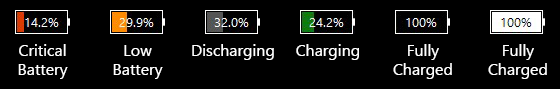
<style>
.page{position:relative;width:560px;height:89px;background:#000000}
.page>*{position:absolute;margin:0}
.t1{font:16px "SegoeUI";color:#ffffff}
</style>
<div class="page">
<p class="t1" style="left:18px;top:44px;width:50px;height:35px;text-align:center">Critical Battery</p>
<p class="t1" style="left:113px;top:45px;width:50px;height:34px;text-align:center">Low Battery</p>
<p class="t1" style="left:192px;top:44px;width:82px;height:16px">Discharging</p>
<p class="t1" style="left:296px;top:44px;width:63px;height:16px">Charging</p>
<p class="t1" style="left:393px;top:44px;width:59px;height:35px;text-align:center">Fully Charged</p>
<p class="t1" style="left:488px;top:44px;width:59px;height:35px;text-align:center">Fully Charged</p>
</div>
